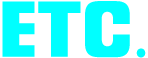
<style>
.page{position:relative;width:148px;height:58px;background:#00ffff}
.page>*{position:absolute;margin:0}
.t1{font:72px "NeographikMT";color:#00ffff}
.t2{font:72px "MyriadPro-Regular";color:#00ffff}
</style>
<div class="page">
<p class="t1" style="left:2px;top:1px;width:144px;height:57px">ETC<span class="t2">.</span></p>
</div>
